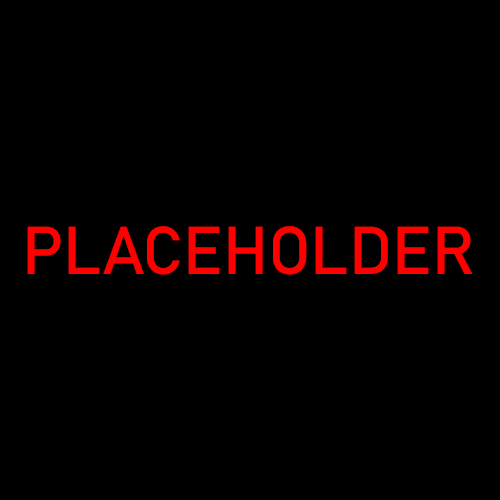
<style>
.page{position:relative;width:500px;height:500px;background:#000000}
.page>*{position:absolute;margin:0}
.t1{font:66.7px "Bahnschrift";color:#ff0000}
</style>
<div class="page">
<p class="t1" style="left:27px;top:226px;width:446px;height:49px">PLACEHOLDER</p>
</div>
